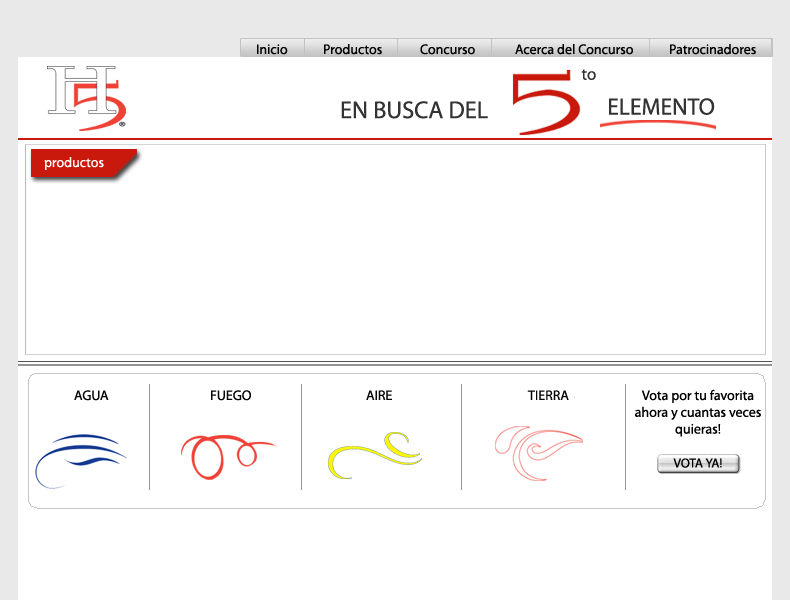
<style>
.page{position:relative;width:790px;height:600px;background:#ffffff}
.page>*{position:absolute;margin:0}
.t1{font:14px "Myriad-Roman";color:#000000}
.t2{font:16.9px "Myriad-Roman";color:#333333}
.t3{font:24.4px "Myriad-Roman";color:#333333}
.t4{font:23.6px "Myriad-Roman";color:#333333}
.t5{font:14px "Myriad-Roman";color:#ffffff}
.t6{font:14px "Myriad-Roman";color:#050505}
.t7{font:13px "Myriad-Roman";color:#000000}
</style>
<div class="page">
<p class="t1" style="left:257px;top:44px;width:31px;height:11px">Inicio</p>
<p class="t1" style="left:324px;top:44px;width:58px;height:11px">Productos</p>
<p class="t1" style="left:420px;top:44px;width:55px;height:11px">Concurso</p>
<p class="t1" style="left:515px;top:44px;width:118px;height:11px">Acerca del Concurso</p>
<p class="t1" style="left:670px;top:44px;width:86px;height:11px">Patrocinadores</p>
<p class="t2" style="left:581px;top:69px;width:15px;height:11px">to</p>
<p class="t3" style="left:341px;top:101px;width:147px;height:18px">EN BUSCA DEL</p>
<p class="t4" style="left:609px;top:98px;width:106px;height:17px">ELEMENTO</p>
<p class="t5" style="left:44px;top:157px;width:60px;height:13px">productos</p>
<p class="t6" style="left:74px;top:390px;width:35px;height:11px">AGUA</p>
<p class="t6" style="left:211px;top:390px;width:40px;height:11px">FUEGO</p>
<p class="t6" style="left:366px;top:390px;width:26px;height:10px">AIRE</p>
<p class="t6" style="left:527px;top:390px;width:42px;height:10px">TIERRA</p>
<p class="t1" style="left:635px;top:389px;width:126px;height:48px;text-align:center">Vota por tu favorita <br>ahora y cuantas veces<br>quieras!</p>
<p class="t7" style="left:673px;top:458px;width:49px;height:10px">VOTA YA!</p>
</div>
